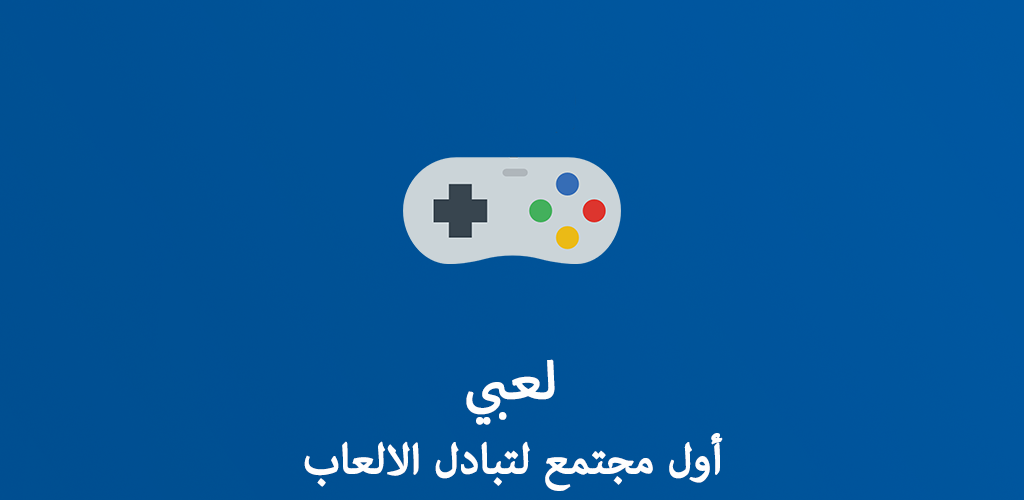
<style>
.page{position:relative;width:1024px;height:500px}
.page>*{position:absolute;margin:0}
.t1{font:72px "MyriadArabic-Regular";color:#fefefe;font-weight:bold}
.t2{font:60px "AdobeArabic-Regular";color:#fefefe;font-weight:bold}
</style>
<div class="page">
<p class="t1" style="left:466px;top:359px;width:89px;height:66px">لعبي</p>
<p class="t2" style="left:304px;top:433px;width:419px;height:58px">أول مجتمع لتبادل الالعاب</p>
</div>
